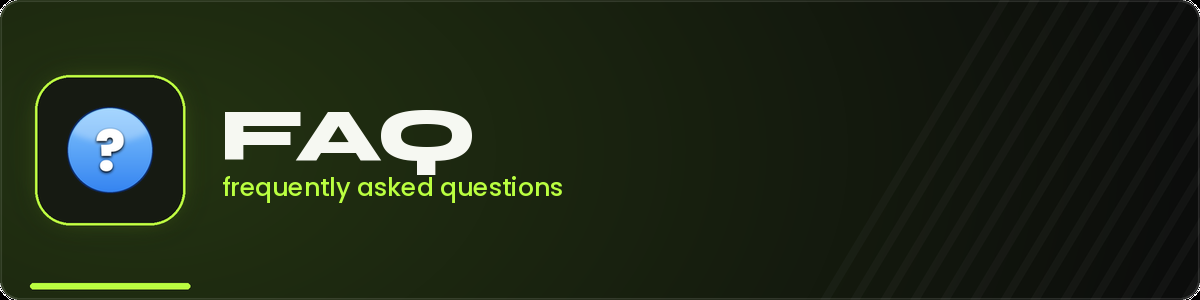
<style>
.page{position:relative;width:1200px;height:300px}
.page>*{position:absolute;margin:0}
.t1{font:75px "Syne-ExtraBold";color:#f6f8f2}
.t2{font:25px "Poppins-Medium";color:#baff40}
</style>
<div class="page">
<p class="t1" style="left:225px;top:110px;width:247px;height:65px">FAQ</p>
<p class="t2" style="left:223px;top:176px;width:339px;height:27px">frequently asked questions</p>
</div>
